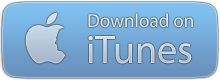
<style>
.page{position:relative;width:220px;height:80px}
.page>*{position:absolute;margin:0}
.t1{font:19px "MyriadPro-Regular";color:#dde7f0}
.t2{font:40px "MyriadPro-Regular";color:#c8d4e1}
</style>
<div class="page">
<p class="t1" style="left:88px;top:13px;width:105px;height:15px">Download on</p>
<p class="t2" style="left:88px;top:36px;width:104px;height:28px">iTunes</p>
</div>
